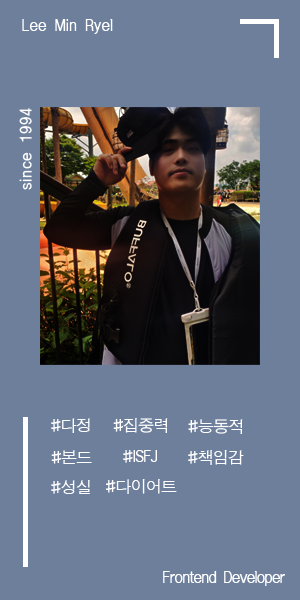
<style>
.page{position:relative;width:300px;height:600px;background:#6d7f9b}
.page>*{position:absolute;margin:0}
.t1{font:16px "ÈÞ¸Õ°íµñ";color:#ffffff}
.t2{font:16px "ÈÞ¸Õ°íµñ";letter-spacing:0.05em;color:#ffffff}
.t3{font:16px "ÈÞ¸Õ°íµñ";letter-spacing:-0.05em;color:#ffffff}
</style>
<div class="page">
<p class="t1" style="left:22px;top:19px;width:91px;height:15px">Lee Min Ryel</p>
<p class="t2" style="left:19px;top:108px;width:13px;height:82px;rotate:-90deg">since 1994</p>
<p class="t3" style="left:51px;top:418px;width:39px;height:15px">#다정</p>
<p class="t3" style="left:113px;top:418px;width:55px;height:15px">#집중력</p>
<p class="t3" style="left:188px;top:419px;width:55px;height:15px">#능동적</p>
<p class="t3" style="left:51px;top:450px;width:41px;height:14px">#본드</p>
<p class="t3" style="left:123px;top:450px;width:34px;height:13px">#ISFJ</p>
<p class="t3" style="left:188px;top:450px;width:56px;height:15px">#책임감</p>
<p class="t3" style="left:51px;top:480px;width:39px;height:14px">#성실</p>
<p class="t3" style="left:106px;top:479px;width:71px;height:15px">#다이어트</p>
<p class="t3" style="left:163px;top:571px;width:122px;height:15px">Frontend Developer</p>
</div>
